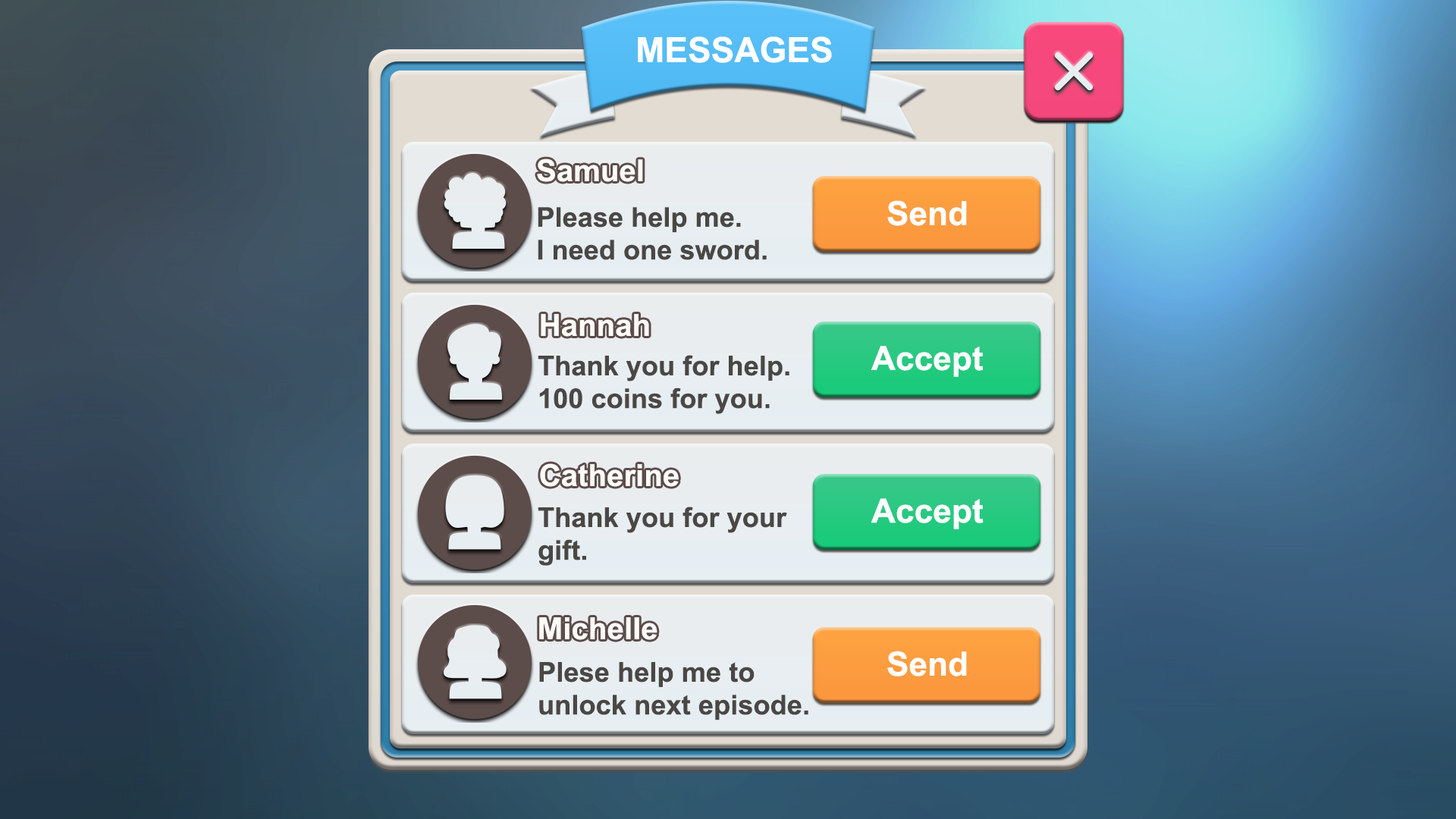
<style>
.page{position:relative;width:1456px;height:819px}
.page>*{position:absolute;margin:0}
.t1{font:34.9px "Arial-BoldMT";color:#ffffff}
.t2{font:30.2px "Arial-BoldMT";color:#ffffff}
.t3{font:27.2px "Arial-BoldMT";color:#4a4744}
.t4{font:33.4px "Arial-BoldMT";color:#ffffff}
.t5{font:30.3px "Arial-BoldMT";color:#ffffff}
.t6{font:27.3px "Arial-BoldMT";color:#4a4744}
</style>
<div class="page">
<p class="t1" style="left:638px;top:36px;width:194px;height:27px">MESSAGES</p>
<p class="t2" style="left:537px;top:158px;width:106px;height:24px">Samuel</p>
<p class="t3" style="left:538px;top:207px;width:229px;height:53px">Please help me.<br>I need one sword.</p>
<p class="t4" style="left:887px;top:200px;width:80px;height:26px">Send</p>
<p class="t5" style="left:541px;top:314px;width:108px;height:23px">Hannah</p>
<p class="t4" style="left:871px;top:346px;width:113px;height:31px">Accept</p>
<p class="t6" style="left:538px;top:355px;width:251px;height:59px">Thank you for help.<br>100 coins for you.</p>
<p class="t5" style="left:540px;top:463px;width:139px;height:24px">Catherine</p>
<p class="t6" style="left:538px;top:507px;width:249px;height:59px">Thank you for your<br>gift.</p>
<p class="t4" style="left:871px;top:498px;width:113px;height:31px">Accept</p>
<p class="t5" style="left:539px;top:617px;width:118px;height:23px">Michelle</p>
<p class="t4" style="left:887px;top:651px;width:80px;height:25px">Send</p>
<p class="t6" style="left:539px;top:662px;width:269px;height:58px">Plese help me to <br>unlock next episode.</p>
</div>
